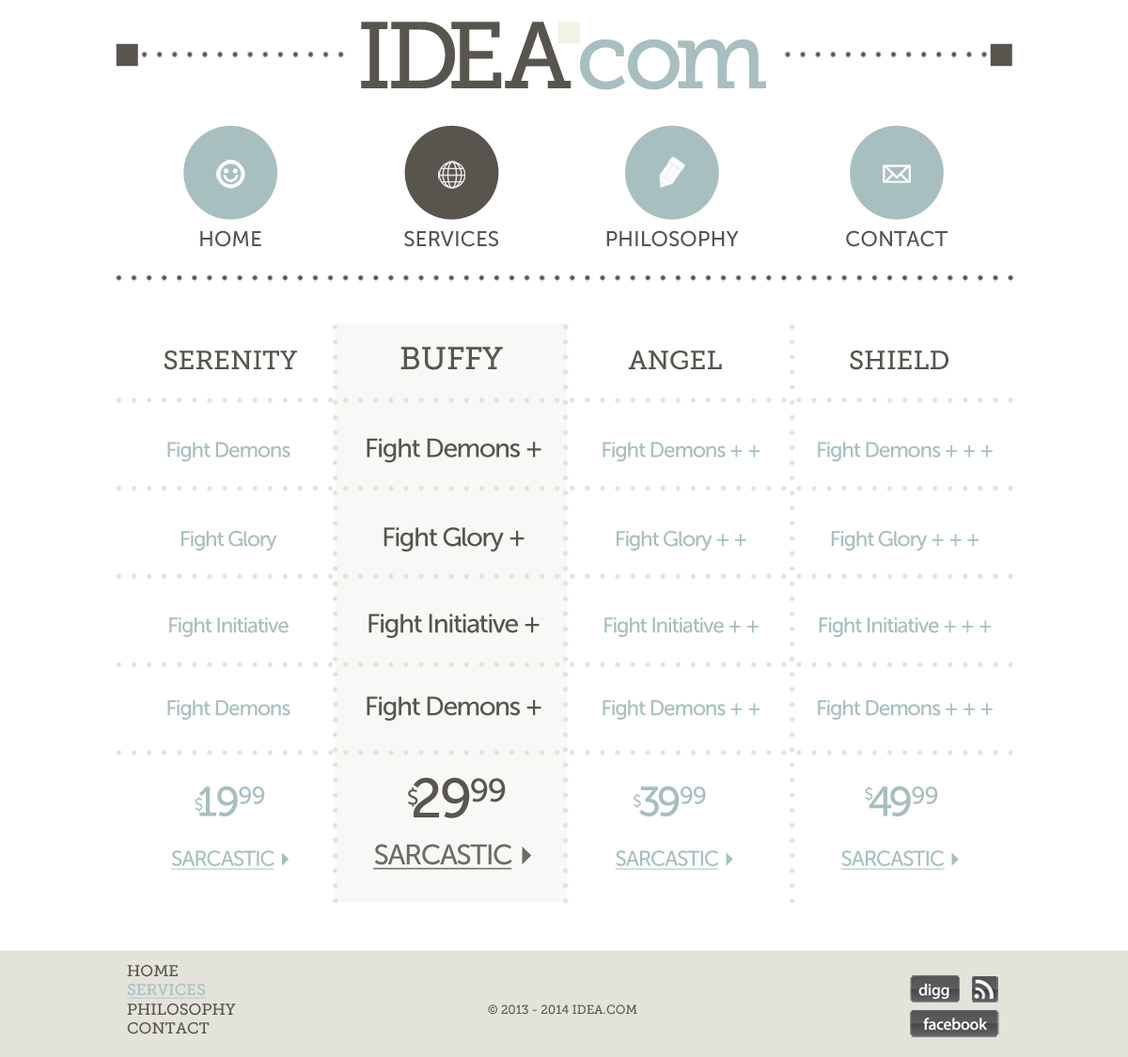
<style>
.page{position:relative;width:1128px;height:1057px;background:#ffffff}
.page>*{position:absolute;margin:0}
.t1{font:94.2px "MuseoSlab-500";color:#58554e}
.t2{font:207.4px "MuseoSlab-500";color:#f3f3e5}
.t3{font:94.2px "MuseoSlab-500";color:#a7bfbe}
.t4{font:207.4px "MuseoSlab-500";color:#58554e}
.t5{font:21.1px "MuseoSans-500";color:#58544e}
.t6{font:26.4px "MuseoSlab-500";color:#58554e}
.t7{font:31.7px "MuseoSlab-500";color:#58554e}
.t8{font:26.4px "MuseoSans-500";letter-spacing:-0.05em;color:#58544e}
.t9{font:21.1px "MuseoSans-500";letter-spacing:-0.05em;color:#a7bfbe}
.t10{font:41.5px "MuseoSans-500";letter-spacing:-0.05em;color:#a7bfbe}
.t11{font:15.9px "MuseoSans-500";letter-spacing:-0.05em;color:#a7bfbe}
.t12{font:24.2px "MuseoSans-500";letter-spacing:-0.05em;color:#a7bfbe}
.t13{font:55.3px "MuseoSans-500";letter-spacing:-0.05em;color:#59554f}
.t14{font:21.1px "MuseoSans-500";letter-spacing:-0.05em;color:#59554f}
.t15{font:32.3px "MuseoSans-500";letter-spacing:-0.05em;color:#59554f}
.t16{font:28.3px "MuseoSans-500";letter-spacing:-0.05em;color:#6e6b66;text-transform:uppercase;text-decoration:underline}
.t17{font:28.3px "Webdings";letter-spacing:-0.05em;color:#6e6b66;text-transform:uppercase}
.t18{font:21.1px "MuseoSans-500";letter-spacing:-0.05em;color:#a7bfbe;text-transform:uppercase;text-decoration:underline}
.t19{font:21.1px "Webdings";letter-spacing:-0.05em;color:#a7bfbe;text-transform:uppercase}
.t20{font:15.8px "MuseoSlab-500";color:#59554f}
.t21{font:15.8px "MuseoSlab-500";color:#a7bfbe;text-decoration:underline}
.t22{font:12.3px "MuseoSlab-500";color:#59554f}
</style>
<div class="page">
<p class="t1" style="left:361px;top:22px;width:210px;height:66px">IDEA</p>
<p class="t2" style="left:557px;top:21px;width:23px;height:23px">.</p>
<p class="t3" style="left:580px;top:39px;width:186px;height:51px">com</p>
<p class="t4" style="left:116px;top:43px;width:22px;height:24px">.</p>
<p class="t4" style="left:990px;top:43px;width:22px;height:24px">.</p>
<p class="t5" style="left:200px;top:230px;width:61px;height:17px">HOME</p>
<p class="t5" style="left:404px;top:230px;width:94px;height:17px">SERVICES</p>
<p class="t5" style="left:606px;top:230px;width:133px;height:17px">PHILOSOPHY</p>
<p class="t5" style="left:846px;top:230px;width:101px;height:17px">CONTACT</p>
<p class="t6" style="left:164px;top:351px;width:133px;height:19px">SERENITY</p>
<p class="t7" style="left:400px;top:347px;width:103px;height:23px">BUFFY</p>
<p class="t6" style="left:628px;top:351px;width:94px;height:19px">ANGEL</p>
<p class="t6" style="left:850px;top:351px;width:98px;height:19px">SHIELD</p>
<p class="t8" style="left:367px;top:438px;width:174px;height:25px">Fight Demons +</p>
<p class="t9" style="left:167px;top:442px;width:123px;height:20px">Fight Demons</p>
<p class="t9" style="left:602px;top:442px;width:158px;height:20px">Fight Demons + +</p>
<p class="t9" style="left:818px;top:442px;width:174px;height:20px">Fight Demons + + +</p>
<p class="t9" style="left:181px;top:531px;width:96px;height:20px">Fight Glory</p>
<p class="t8" style="left:383px;top:527px;width:141px;height:25px">Fight Glory +</p>
<p class="t9" style="left:617px;top:531px;width:129px;height:20px">Fight Glory + +</p>
<p class="t9" style="left:831px;top:531px;width:148px;height:20px">Fight Glory + + +</p>
<p class="t9" style="left:169px;top:617px;width:120px;height:20px">Fight Initiative</p>
<p class="t8" style="left:368px;top:614px;width:171px;height:24px">Fight Initiative +</p>
<p class="t9" style="left:604px;top:617px;width:154px;height:20px">Fight Initiative + +</p>
<p class="t9" style="left:819px;top:617px;width:173px;height:20px">Fight Initiative + + +</p>
<p class="t9" style="left:167px;top:700px;width:123px;height:20px">Fight Demons</p>
<p class="t8" style="left:367px;top:696px;width:174px;height:25px">Fight Demons +</p>
<p class="t9" style="left:602px;top:700px;width:158px;height:20px">Fight Demons + +</p>
<p class="t9" style="left:818px;top:700px;width:174px;height:20px">Fight Demons + + +</p>
<p class="t10" style="left:195px;top:786px;width:70px;height:31px"><span class="t11">$</span>19<span class="t12">99</span></p>
<p class="t13" style="left:408px;top:777px;width:98px;height:42px"><span class="t14">$</span>29<span class="t15">99</span></p>
<p class="t10" style="left:633px;top:786px;width:73px;height:31px"><span class="t11">$</span>39<span class="t12">99</span></p>
<p class="t10" style="left:865px;top:786px;width:73px;height:31px"><span class="t11">$</span>49<span class="t12">99</span></p>
<p class="t16" style="left:373px;top:844px;width:158px;height:26px">Sarcastic<span class="t17">4</span></p>
<p class="t18" style="left:171px;top:851px;width:118px;height:19px">Sarcastic<span class="t19">4</span></p>
<p class="t18" style="left:615px;top:851px;width:118px;height:19px">Sarcastic<span class="t19">4</span></p>
<p class="t18" style="left:840px;top:851px;width:119px;height:19px">Sarcastic<span class="t19">4</span></p>
<p class="t20" style="left:126px;top:965px;width:110px;height:70px">HOME<br><span class="t21">SERVICES<br></span>PHILOSOPHY<br>CONTACT</p>
<p class="t22" style="left:488px;top:1005px;width:149px;height:10px">© 2013 - 2014 IDEA.COM</p>
</div>
